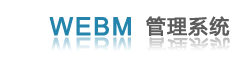
<style>
.page{position:relative;width:250px;height:68px;background:#ffffff}
.page>*{position:absolute;margin:0}
.t1{font:24.6px "ArialMT";letter-spacing:0.055em;color:#2484ac;font-weight:bold}
.t2{font:19.6px "MicrosoftYaHei";letter-spacing:0.055em;color:#5c5c5c;font-weight:bold}
.t3{font:24.6px "ArialMT";letter-spacing:0.055em;font-weight:bold}
.t4{font:19.6px "MicrosoftYaHei";letter-spacing:0.055em;font-weight:bold}
</style>
<div class="page">
<p class="t1" style="left:49px;top:17px;width:82px;height:19px">WEBM</p>
<p class="t2" style="left:146px;top:16px;width:84px;height:21px"><span class="t1">            </span>管理系统</p>
<p class="t3" style="left:49px;top:37px;width:82px;height:19px">WEBM</p>
<p class="t4" style="left:146px;top:37px;width:84px;height:21px">管理系统</p>
</div>
